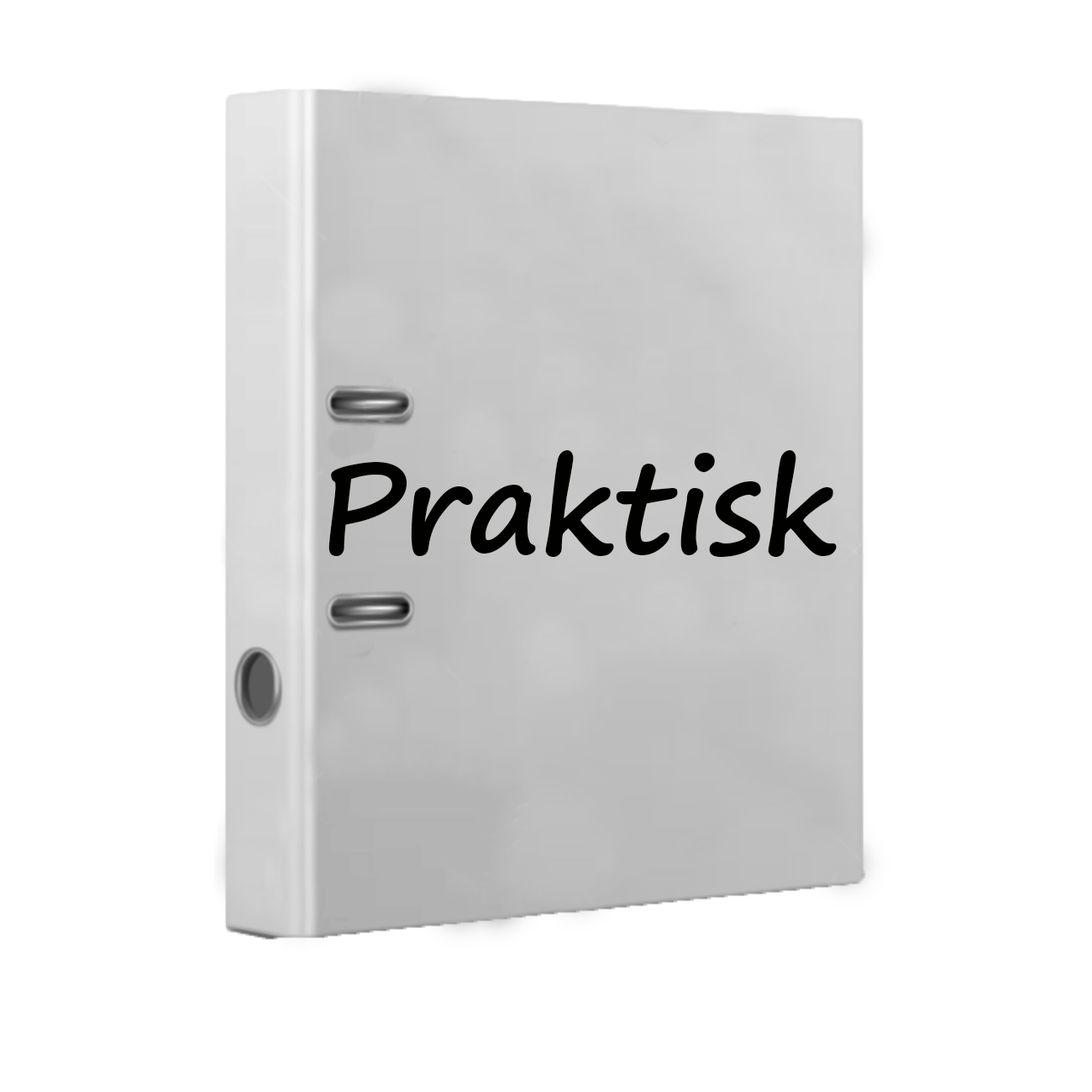
<style>
.page{position:relative;width:1092px;height:1092px;background:#ffffff}
.page>*{position:absolute;margin:0}
.t1{font:126px "SegoePrint-Bold";color:#010100}
</style>
<div class="page">
<p class="t1" style="left:328px;top:450px;width:509px;height:107px">Praktisk</p>
</div>
